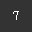
<style>
.page{position:relative;width:32px;height:32px;background:#333333}
.page>*{position:absolute;margin:0}
.t1{font:12px "CenturySchoolbook";letter-spacing:0.06em;color:#ffffff}
</style>
<div class="page">
<p class="t1" style="left:13px;top:11px;width:6px;height:9px">7</p>
</div>
